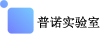
<style>
.page{position:relative;width:100px;height:34px;background:#ffffff}
.page>*{position:absolute;margin:0}
.t1{font:12.6px "NSimSun";color:#000000}
</style>
<div class="page">
<p class="t1" style="left:37px;top:16px;width:63px;height:13px">普诺实验室</p>
</div>
